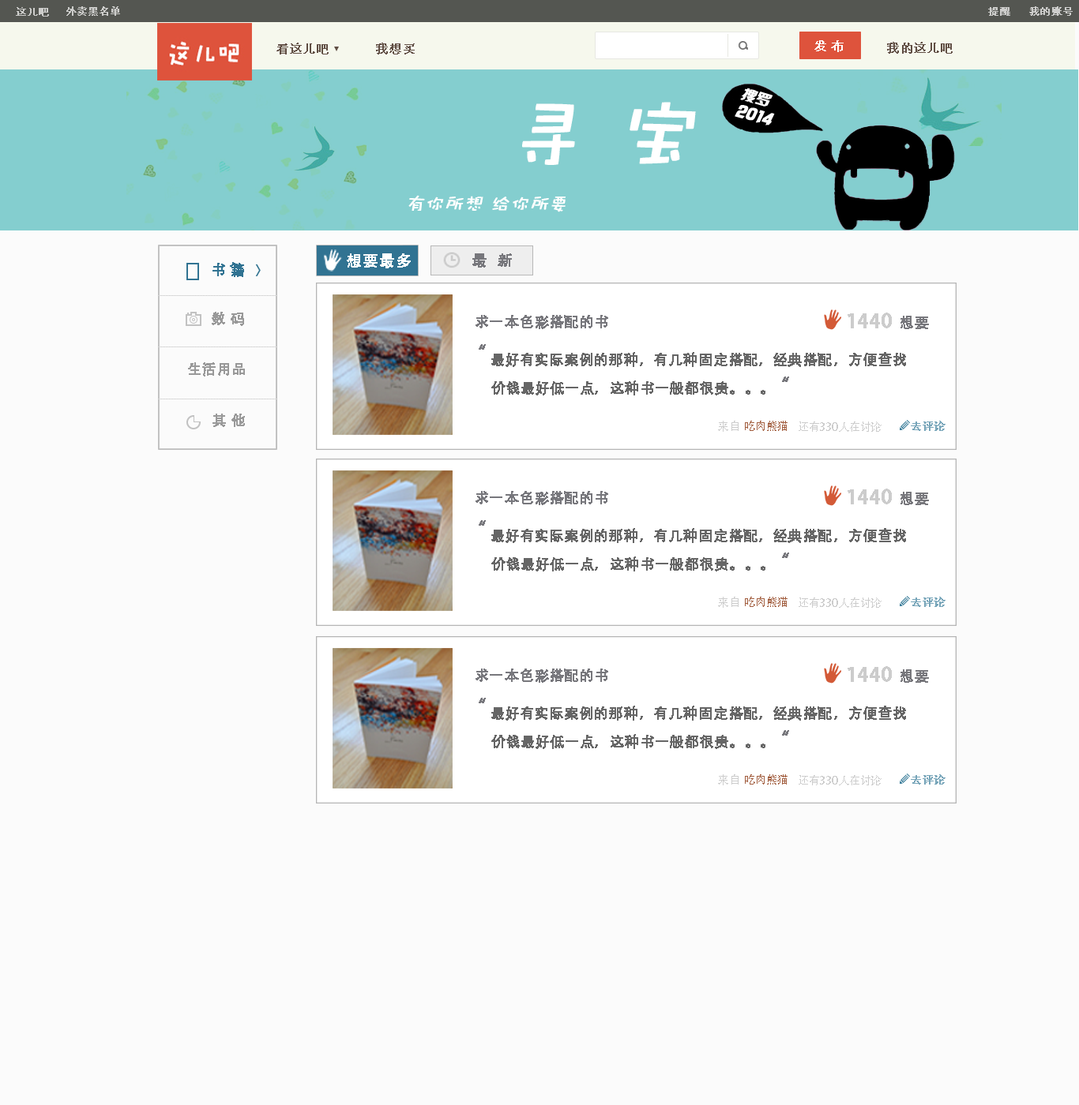
<style>
.page{position:relative;width:1079px;height:1105px;background:#fbfbfb}
.page>*{position:absolute;margin:0}
.t1{font:10.3px "AdobeHeitiStd-Regular";color:#cdcdcb;font-weight:bold}
.t2{font:12.6px "STHeitiSC-Light";color:#ffffff;font-weight:bold}
.t3{font:12.6px "AdobeHeitiStd-Regular";color:#604e44;font-weight:bold}
.t4{font:14.2px "HYk2gj";color:#ffffff;font-weight:bold;font-style:italic}
.t5{font:79px "DFWaWaSC-W5";color:#ffffff;font-weight:bold;font-style:italic}
.t6{font:19px "HYk2gj";color:#ffffff;font-weight:bold;font-style:italic}
.t7{font:19px "DFWaWaSC-W5";color:#ffffff;font-weight:bold;font-style:italic}
.t8{font:15.3px "AdobeHeitiStd-Regular";color:#ffffff;font-weight:bold}
.t9{font:14.5px "AdobeHeitiStd-Regular";color:#77777c;font-weight:bold;scale:1.05 1}
.t10{font:14.2px "AdobeHeitiStd-Regular";color:#317392;font-weight:bold}
.t11{font:14.2px "AdobeHeitiStd-Regular";color:#999999;font-weight:bold}
.t12{font:14.2px "AdobeHeitiStd-Regular";color:#77777c;font-weight:bold}
.t13{font:19px "AdobeHeitiStd-Regular";color:#cccccc;font-weight:bold}
.t14{font:19px "AdobeHeitiStd-Regular";color:#77777c;font-weight:bold}
.t15{font:14.2px "AdobeHeitiStd-Regular";color:#666666;font-weight:bold}
.t16{font:11.1px "AdobeHeitiStd-Regular";color:#cccccc}
.t17{font:11.1px "AdobeHeitiStd-Regular";color:#a25e3f}
.t18{font:11.1px "AdobeHeitiStd-Regular";color:#77a5b9;font-weight:bold}
</style>
<div class="page">
<p class="t1" style="left:16px;top:7px;width:33px;height:10px">这儿吧</p>
<p class="t1" style="left:66px;top:6px;width:54px;height:10px">外卖黑名单</p>
<p class="t1" style="left:988px;top:7px;width:22px;height:9px">提醒</p>
<p class="t1" style="left:1029px;top:6px;width:43px;height:10px">我的账号</p>
<p class="t2" style="left:814px;top:40px;width:29px;height:12px">发 布</p>
<p class="t3" style="left:887px;top:42px;width:65px;height:12px">我的这儿吧</p>
<p class="t3" style="left:276px;top:43px;width:52px;height:11px">看这儿吧</p>
<p class="t3" style="left:376px;top:43px;width:39px;height:11px">我想买</p>
<p class="t4" style="left:740px;top:88px;width:33px;height:19px;rotate:17deg">搜罗</p>
<p class="t5" style="left:522px;top:102px;width:174px;height:63px">寻 宝</p>
<p class="t6" style="left:734px;top:105px;width:41px;height:21px;rotate:16deg">2014</p>
<p class="t7" style="left:408px;top:195px;width:157px;height:17px">有你所想 给你所要</p>
<p class="t8" style="left:347px;top:253px;width:64px;height:15px">想要最多</p>
<p class="t9" style="left:472px;top:253px;width:40px;height:15px">最  新</p>
<p class="t10" style="left:212px;top:262px;width:32px;height:15px">书 籍</p>
<p class="t11" style="left:212px;top:312px;width:32px;height:14px">数 码</p>
<p class="t12" style="left:475px;top:315px;width:133px;height:14px">求一本色彩搭配的书</p>
<p class="t13" style="left:847px;top:313px;width:45px;height:15px">1440</p>
<p class="t12" style="left:900px;top:316px;width:29px;height:13px">想要</p>
<p class="t14" style="left:479px;top:344px;width:7px;height:6px">“</p>
<p class="t15" style="left:491px;top:352px;width:415px;height:15px">最好有实际案例的那种，有几种固定搭配，经典搭配，方便查找</p>
<p class="t11" style="left:188px;top:362px;width:57px;height:15px">生活用品</p>
<p class="t14" style="left:782px;top:377px;width:7px;height:5px">“</p>
<p class="t15" style="left:491px;top:381px;width:274px;height:15px">价钱最好低一点，这种书一般都很贵。。。</p>
<p class="t11" style="left:212px;top:414px;width:33px;height:13px">其 他</p>
<p class="t16" style="left:718px;top:421px;width:20px;height:11px">来自</p>
<p class="t17" style="left:745px;top:421px;width:42px;height:10px">吃肉熊猫</p>
<p class="t16" style="left:798px;top:422px;width:83px;height:10px">还有330人在讨论</p>
<p class="t18" style="left:910px;top:421px;width:35px;height:10px">去评论</p>
<p class="t12" style="left:475px;top:491px;width:133px;height:14px">求一本色彩搭配的书</p>
<p class="t13" style="left:847px;top:489px;width:45px;height:16px">1440</p>
<p class="t12" style="left:900px;top:492px;width:29px;height:13px">想要</p>
<p class="t14" style="left:479px;top:520px;width:7px;height:6px">“</p>
<p class="t15" style="left:491px;top:528px;width:415px;height:15px">最好有实际案例的那种，有几种固定搭配，经典搭配，方便查找</p>
<p class="t15" style="left:491px;top:557px;width:274px;height:15px">价钱最好低一点，这种书一般都很贵。。。</p>
<p class="t14" style="left:782px;top:553px;width:7px;height:5px">“</p>
<p class="t16" style="left:718px;top:597px;width:20px;height:11px">来自</p>
<p class="t17" style="left:745px;top:597px;width:42px;height:10px">吃肉熊猫</p>
<p class="t16" style="left:798px;top:598px;width:83px;height:10px">还有330人在讨论</p>
<p class="t18" style="left:910px;top:597px;width:35px;height:10px">去评论</p>
<p class="t12" style="left:475px;top:669px;width:133px;height:14px">求一本色彩搭配的书</p>
<p class="t13" style="left:847px;top:666px;width:45px;height:16px">1440</p>
<p class="t12" style="left:900px;top:670px;width:29px;height:13px">想要</p>
<p class="t14" style="left:479px;top:698px;width:7px;height:6px">“</p>
<p class="t15" style="left:491px;top:706px;width:415px;height:15px">最好有实际案例的那种，有几种固定搭配，经典搭配，方便查找</p>
<p class="t15" style="left:491px;top:734px;width:274px;height:15px">价钱最好低一点，这种书一般都很贵。。。</p>
<p class="t14" style="left:782px;top:730px;width:7px;height:6px">“</p>
<p class="t16" style="left:718px;top:775px;width:20px;height:11px">来自</p>
<p class="t17" style="left:745px;top:775px;width:42px;height:10px">吃肉熊猫</p>
<p class="t16" style="left:798px;top:775px;width:83px;height:11px">还有330人在讨论</p>
<p class="t18" style="left:910px;top:775px;width:35px;height:10px">去评论</p>
</div>
